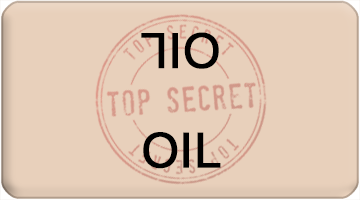
<style>
.page{position:relative;width:360px;height:200px;background:#e8d0bb}
.page>*{position:absolute;margin:0}
.t1{font:48px "ArialMT";color:#000000;font-weight:bold}
</style>
<div class="page">
<p class="t1" style="left:141px;top:32px;width:78px;height:37px;rotate:180deg">OIL</p>
<p class="t1" style="left:143px;top:132px;width:78px;height:37px">OIL</p>
</div>
